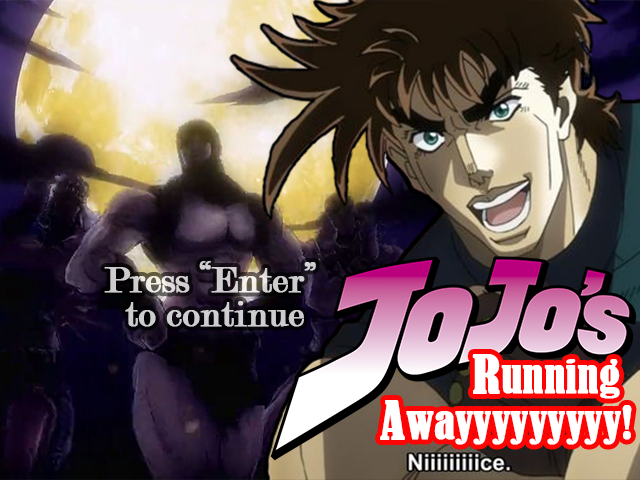
<style>
.page{position:relative;width:640px;height:480px}
.page>*{position:absolute;margin:0}
.t1{font:37.5px/33.3px "Modern-Regular";color:#cecdcf;font-weight:bold}
.t2{font:41.7px/45.8px "BernardMT-Condensed";color:#ffffff;font-weight:bold}
.t3{font:37.5px/33.3px "Modern-Regular";color:#ffffff;font-weight:bold}
.t4{font:50px/45.8px "BernardMT-Condensed";color:#ffffff;font-weight:bold}
</style>
<div class="page">
<p class="t1" style="left:104px;top:261px;width:212px;height:66px;text-align:center">Press “Enter” <br>to continue</p>
<p class="t2" style="left:380px;top:354px;width:252px;height:91px"><span class="t3">         </span><span class="t4">R</span>unning<br><span class="t4">A</span>wayyyyyyyyy!</p>
</div>
